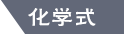
<style>
.page{position:relative;width:130px;height:34px;background:#626878}
.page>*{position:absolute;margin:0}
.t1{font:23px "FZHLJW--GB1-0";color:#fefefe}
</style>
<div class="page">
<p class="t1" style="left:28px;top:8px;width:68px;height:18px">化学式</p>
</div>
